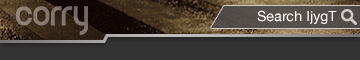
<style>
.page{position:relative;width:360px;height:60px;background:#333333}
.page>*{position:absolute;margin:0}
.t1{font:14px "HelveticaNeue";color:#fffcfc}
</style>
<div class="page">
<p class="t1" style="left:257px;top:10px;width:80px;height:14px">Search IjygT</p>
</div>
